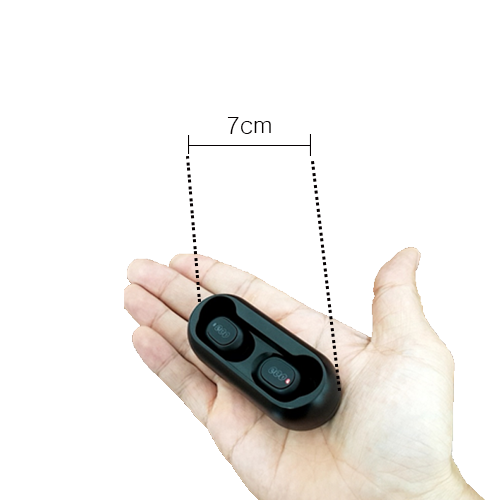
<style>
.page{position:relative;width:500px;height:500px;background:#ffffff}
.page>*{position:absolute;margin:0}
.t1{font:24px "Haansoft-Dotum";color:#050000}
</style>
<div class="page">
<p class="t1" style="left:227px;top:117px;width:44px;height:17px">7cm</p>
</div>
